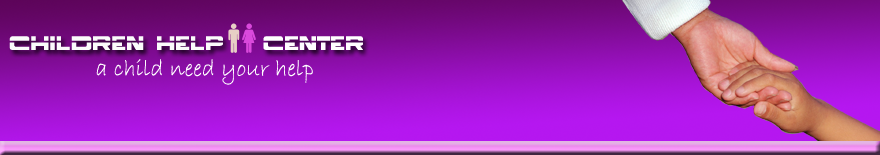
<style>
.page{position:relative;width:880px;height:155px}
.page>*{position:absolute;margin:0}
.t1{font:24px "Borg9";color:#fbfbfb}
.t2{font:24px "Borg9";color:#fffeff}
.t3{font:24px "BradleyHandITC";color:#ffffff}
</style>
<div class="page">
<p class="t1" style="left:9px;top:36px;width:214px;height:14px">Children Help</p>
<p class="t2" style="left:263px;top:36px;width:100px;height:14px">Center</p>
<p class="t3" style="left:96px;top:59px;width:217px;height:26px">a child need your help</p>
</div>
